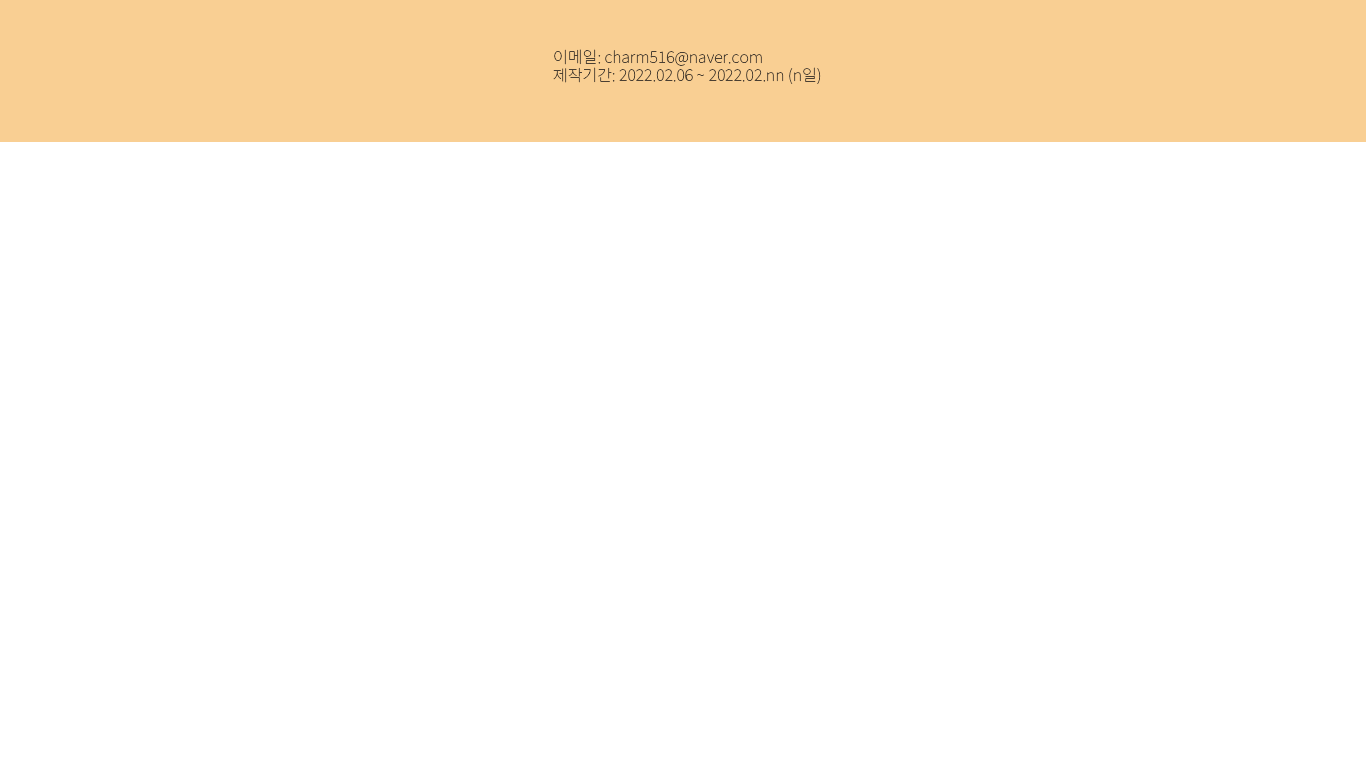
<style>
.page{position:relative;width:1366px;height:768px;background:#ffffff}
.page>*{position:absolute;margin:0}
.t1{font:16px/18px "NotoSansKR-Thin";color:#4a3f32}
</style>
<div class="page">
<p class="t1" style="left:553px;top:49px;width:268px;height:35px;text-align:justify">이메일: charm516@naver.com<br>제작기간: 2022.02.06 ~ 2022.02.nn (n일)</p>
</div>
